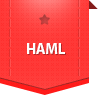
<style>
.page{position:relative;width:100px;height:100px;background:#ffffff}
.page>*{position:absolute;margin:0}
.t1{font:15px "MyriadPro-Bold";letter-spacing:-0.025em;color:#ffffff;text-transform:uppercase}
</style>
<div class="page">
<p class="t1" style="left:27px;top:43px;width:38px;height:11px">HAML</p>
</div>
